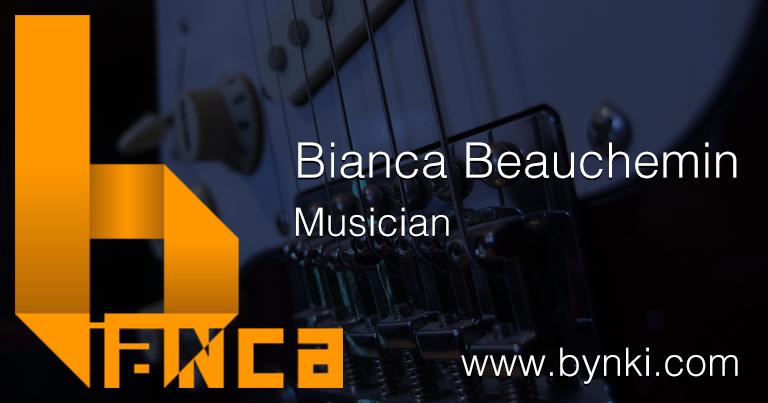
<style>
.page{position:relative;width:768px;height:403px}
.page>*{position:absolute;margin:0}
.t1{font:38.9px "Helvetica-Light";letter-spacing:0.01em}
.t2{font:48.6px "Helvetica-Light";letter-spacing:0.01em}
.t3{font:38.9px "Helvetica-Light";letter-spacing:0.01em;color:#fefefe}
.t4{font:48.6px "Helvetica-Light";letter-spacing:0.01em;color:#fefefe}
</style>
<div class="page">
<p class="t1" style="left:296px;top:144px;width:442px;height:242px;text-align:right"><span class="t2">Bianca Beauchemin<br>             </span>Musician<br><br><br>www.bynki.com</p>
<p class="t3" style="left:296px;top:142px;width:442px;height:242px;text-align:right"><span class="t4">Bianca Beauchemin<br>             </span>Musician<br><br><br>www.bynki.com</p>
</div>
